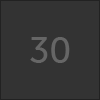
<style>
.page{position:relative;width:100px;height:100px;background:#333333}
.page>*{position:absolute;margin:0}
.t1{font:36px "MuseoSans-500";color:#666666}
</style>
<div class="page">
<p class="t1" style="left:30px;top:37px;width:40px;height:26px">30</p>
</div>
